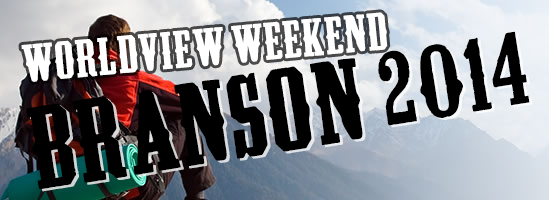
<style>
.page{position:relative;width:549px;height:200px}
.page>*{position:absolute;margin:0}
.t1{font:45.3px "Thistlecreek";letter-spacing:0.025em;color:#ffffff}
.t2{font:99.6px "Thistlecreek";letter-spacing:0.025em;color:#000000}
</style>
<div class="page">
<p class="t1" style="left:21px;top:12px;width:367px;height:70px;rotate:-5deg">Worldview Weekend</p>
<p class="t2" style="left:26px;top:31px;width:504px;height:159px;rotate:-9deg">Branson 2014</p>
<p class="t2" style="left:29px;top:33px;width:504px;height:159px;rotate:-9deg">Branson 2014</p>
</div>
